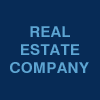
<style>
.page{position:relative;width:100px;height:100px;background:#072b56}
.page>*{position:absolute;margin:0}
.t1{font:15.1px "Swiss721BT-Bold";letter-spacing:0.025em;color:#5da5d2;text-transform:uppercase}
</style>
<div class="page">
<p class="t1" style="left:30px;top:26px;width:40px;height:11px">Real</p>
<p class="t1" style="left:21px;top:44px;width:59px;height:11px">Estate</p>
<p class="t1" style="left:10px;top:62px;width:79px;height:11px">Company</p>
</div>
